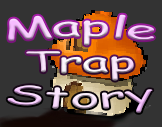
<style>
.page{position:relative;width:162px;height:127px;background:#333333}
.page>*{position:absolute;margin:0}
.t1{font:25.5px "ComicSansMS";scale:2.4 1}
</style>
<div class="page">
<p class="t1" style="left:7px;top:14px;width:147px;height:99px;text-align:center">Maple<br>Trap<br>Story</p>
</div>
